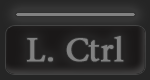
<style>
.page{position:relative;width:150px;height:80px}
.page>*{position:absolute;margin:0}
.t1{font:42.3px "AdobeThai-Regular";color:#818181;font-weight:bold}
</style>
<div class="page">
<p class="t1" style="left:27px;top:36px;width:97px;height:26px">L. Ctrl</p>
</div>
